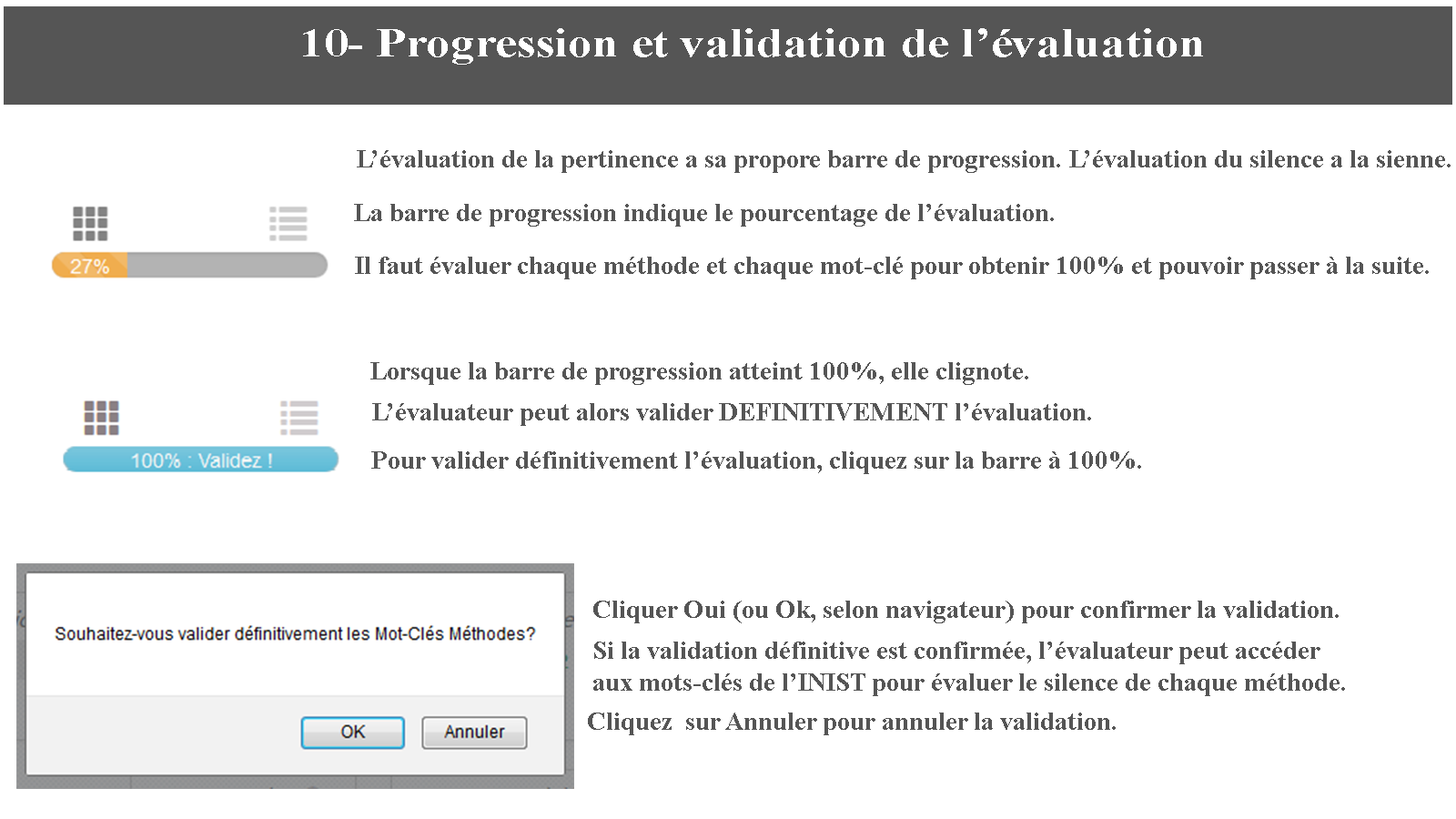
<style>
.page{position:relative;width:1456px;height:819px;background:#ffffff}
.page>*{position:absolute;margin:0}
.t1{font:39.8px "TimesNewRomanPS-BoldMT";color:#ffffff;scale:1.22 1}
.t2{font:26.5px "TimesNewRomanPS-BoldMT";color:#555555}
</style>
<div class="page">
<p class="t1" style="left:303px;top:28px;width:900px;height:37px">10- Progression et validation de l’évaluation</p>
<p class="t2" style="left:357px;top:150px;width:1094px;height:23px">L’évaluation de la pertinence a sa propore barre de progression. L’évaluation du silence a la sienne.</p>
<p class="t2" style="left:354px;top:204px;width:700px;height:23px">La barre de progression indique le pourcentage de l’évaluation.</p>
<p class="t2" style="left:355px;top:257px;width:1074px;height:22px">Il faut évaluer chaque méthode et chaque mot-clé pour obtenir 100% et pouvoir passer à la suite.</p>
<p class="t2" style="left:370px;top:362px;width:658px;height:23px">Lorsque la barre de progression atteint 100%, elle clignote.</p>
<p class="t2" style="left:372px;top:403px;width:719px;height:23px">L’évaluateur peut alors valider DEFINITIVEMENT l’évaluation.</p>
<p class="t2" style="left:371px;top:451px;width:770px;height:23px">Pour valider définitivement l’évaluation, cliquez sur la barre à 100%.</p>
<p class="t2" style="left:593px;top:601px;width:746px;height:22px">Cliquer Oui (ou Ok, selon navigateur) pour confirmer la validation.</p>
<p class="t2" style="left:593px;top:642px;width:752px;height:54px">Si la validation définitive est confirmée, l’évaluateur peut accéder aux mots-clés de l’INIST pour évaluer le silence de chaque méthode.</p>
<p class="t2" style="left:588px;top:713px;width:528px;height:22px">Cliquez  sur Annuler pour annuler la validation.</p>
</div>
